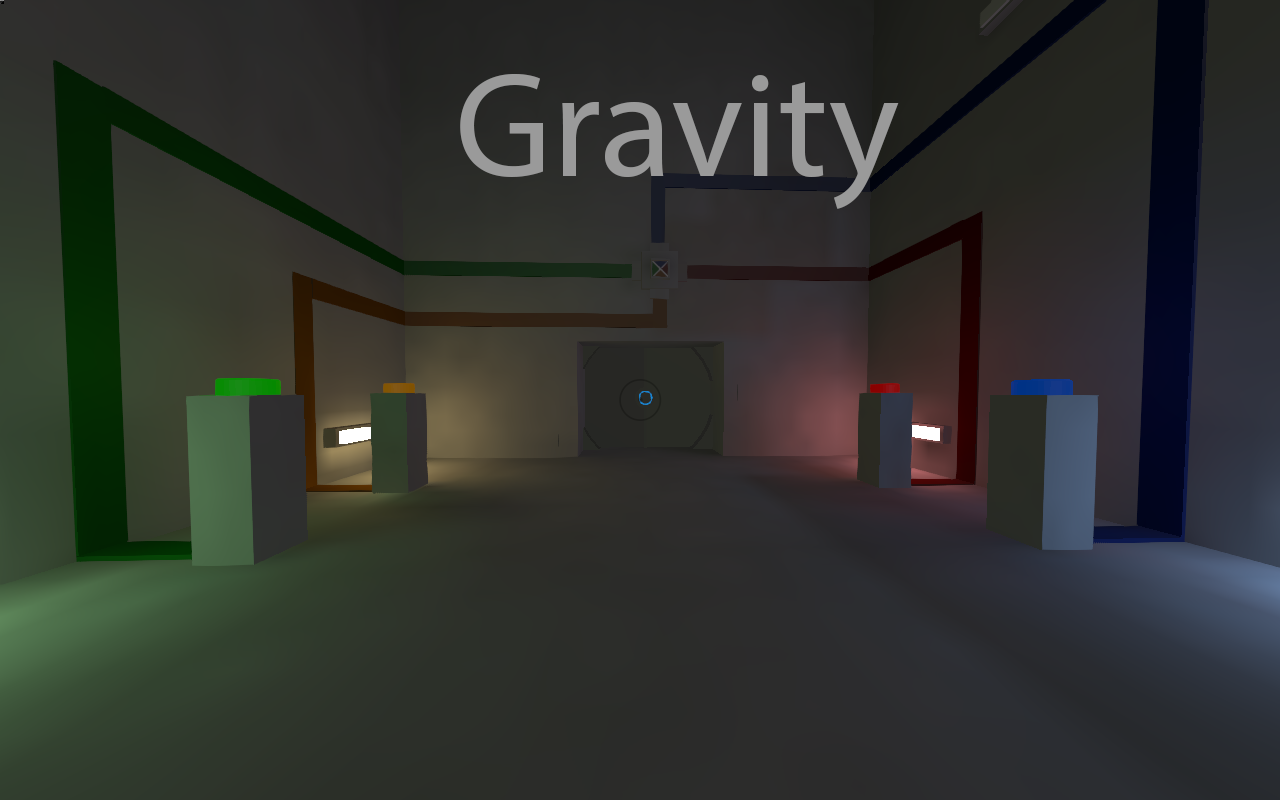
<style>
.page{position:relative;width:1280px;height:800px}
.page>*{position:absolute;margin:0}
.t1{font:150px "MyriadPro-Regular";color:#9a9a9a}
</style>
<div class="page">
<p class="t1" style="left:460px;top:73px;width:439px;height:136px">Gravity</p>
</div>
